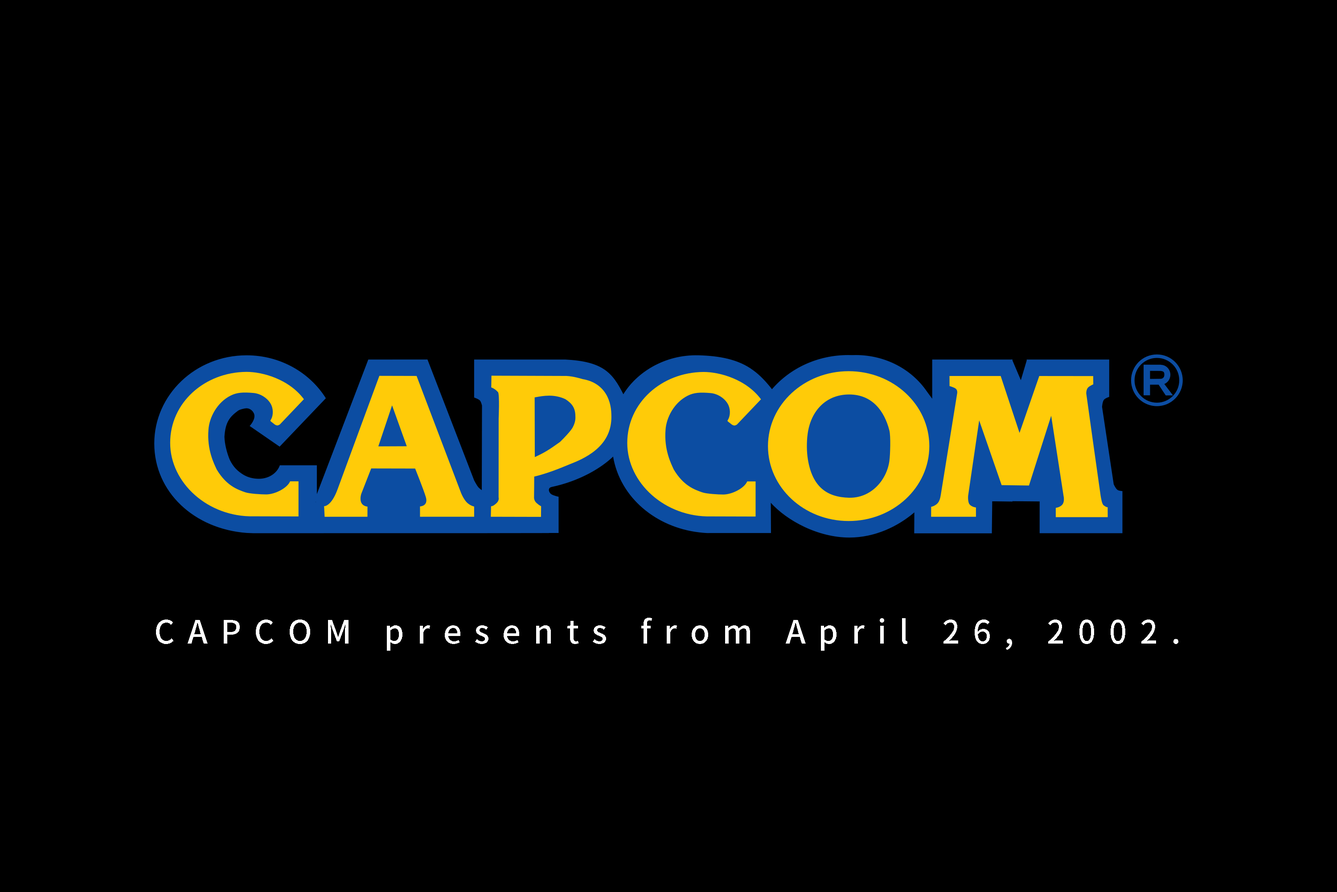
<style>
.page{position:relative;width:1337px;height:892px;background:#000000}
.page>*{position:absolute;margin:0}
.t1{font:32.1px "NotoSansCJKtc-Medium";letter-spacing:0.4em;color:#ffffff}
</style>
<div class="page">
<p class="t1" style="left:156px;top:617px;width:1023px;height:33px">CAPCOM presents from April 26, 2002.</p>
</div>
